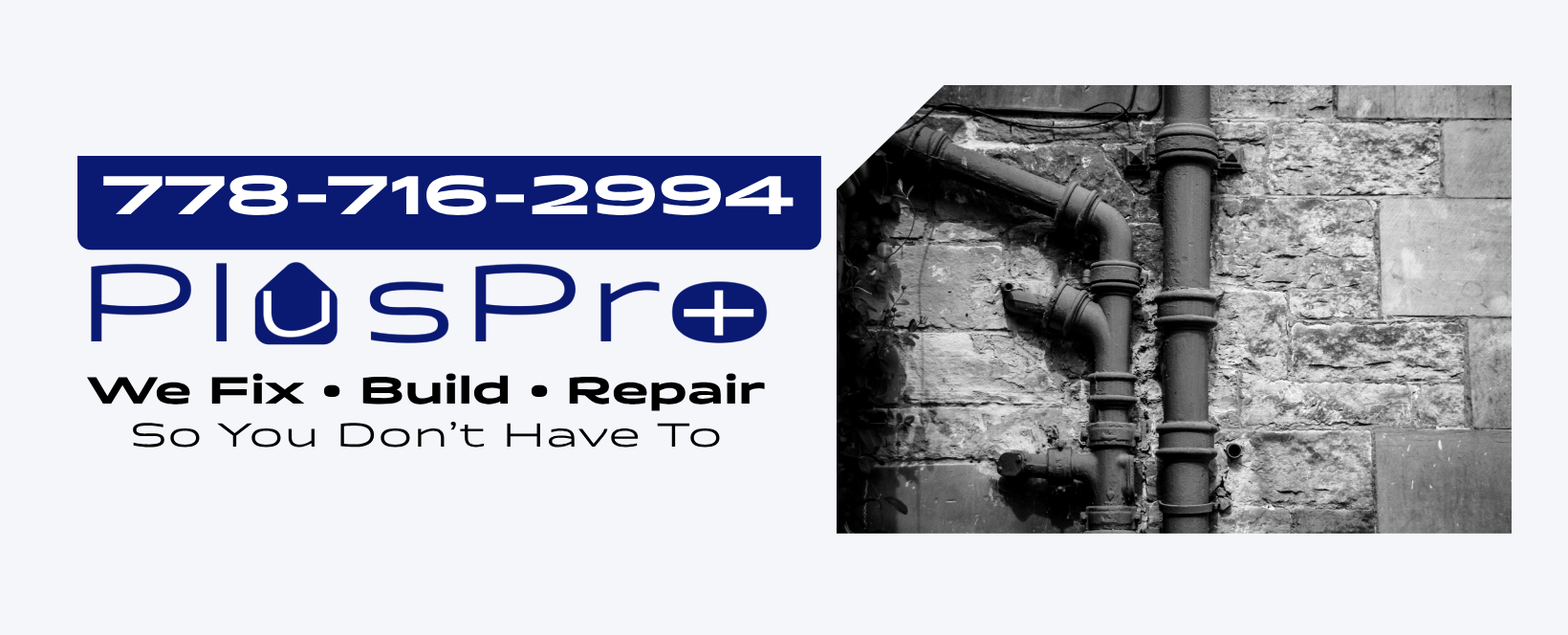
<style>
.page{position:relative;width:1568px;height:635px;background:#f5f6fa}
.page>*{position:absolute;margin:0}
.t1{font:58.4px "Quantum-Bold";color:#ffffff}
.t2{font:40.2px "Quantum-Bold";color:#000000}
.t3{font:35.6px "Quantum-Regular";color:#000000}
</style>
<div class="page">
<p class="t1" style="left:103px;top:175px;width:691px;height:40px">778-716-2994</p>
<p class="t2" style="left:87px;top:373px;width:678px;height:74px;text-align:center">We Fix • Build • Repair<span class="t3"><br>So You Don’t Have To</span></p>
</div>
